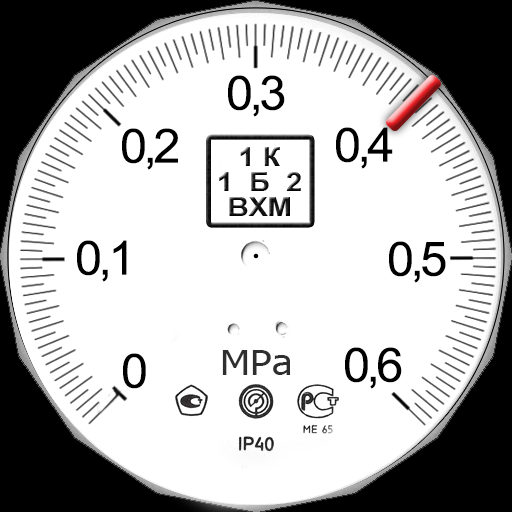
<style>
.page{position:relative;width:512px;height:512px;background:#ffffff}
.page>*{position:absolute;margin:0}
.t1{font:81.2px "ArialMT";letter-spacing:-0.075em;color:#000000}
.t2{font:35px "Tahoma";color:#2e2e2e;scale:1.12 1}
</style>
<div class="page">
<p class="t1" style="left:228px;top:75px;width:57px;height:42px">0,3</p>
<p class="t1" style="left:122px;top:128px;width:56px;height:42px">0,2</p>
<p class="t1" style="left:336px;top:127px;width:57px;height:42px">0,4</p>
<p class="t1" style="left:77px;top:240px;width:50px;height:42px">0,1</p>
<p class="t1" style="left:389px;top:241px;width:57px;height:42px">0,5</p>
<p class="t1" style="left:123px;top:353px;width:23px;height:36px">0</p>
<p class="t2" style="left:222px;top:350px;width:68px;height:25px">MPa</p>
<p class="t1" style="left:345px;top:347px;width:57px;height:42px">0,6</p>
</div>
